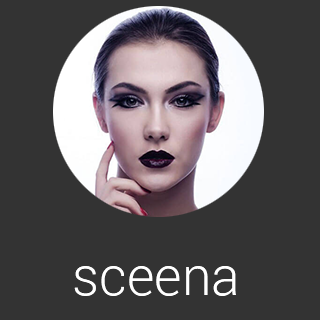
<style>
.page{position:relative;width:320px;height:320px;background:#333333}
.page>*{position:absolute;margin:0}
.t1{font:53px "Roboto-Light";color:#ffffff}
</style>
<div class="page">
<p class="t1" style="left:74px;top:266px;width:162px;height:30px">sceena</p>
</div>
